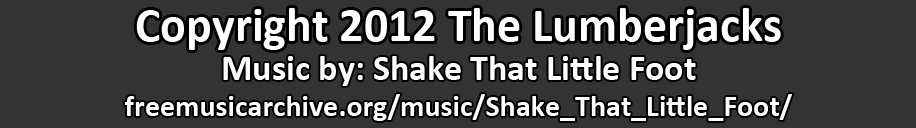
<style>
.page{position:relative;width:916px;height:128px;background:#333333}
.page>*{position:absolute;margin:0}
.t1{font:48px "Calibri-Bold";color:#ffffff}
.t2{font:30px/36px "Calibri-Bold";color:#ffffff}
.t3{font:36px/12px "Calibri-Bold";color:#ffffff}
</style>
<div class="page">
<p class="t1" style="left:136px;top:8px;width:645px;height:42px">Copyright 2012 The Lumberjacks</p>
<p class="t2" style="left:124px;top:56px;width:668px;height:65px;text-align:center"><span class="t3">Music by: Shake That Little Foot<br></span>freemusicarchive.org/music/Shake_That_Little_Foot/</p>
</div>
